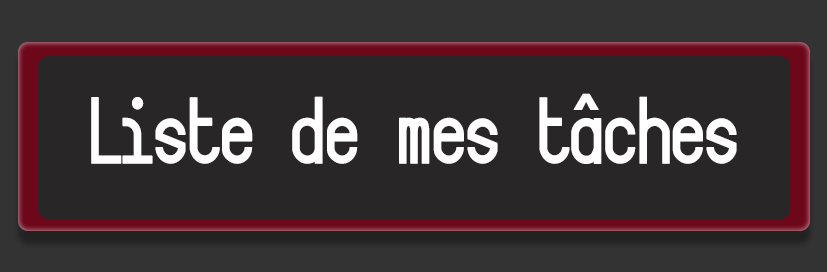
<style>
.page{position:relative;width:827px;height:272px;background:#292627}
.page>*{position:absolute;margin:0}
.t1{font:83.3px "Targa";color:#ffffff;scale:0.9 1}
</style>
<div class="page">
<p class="t1" style="left:91px;top:93px;width:646px;height:71px">Liste de mes tâches</p>
</div>
